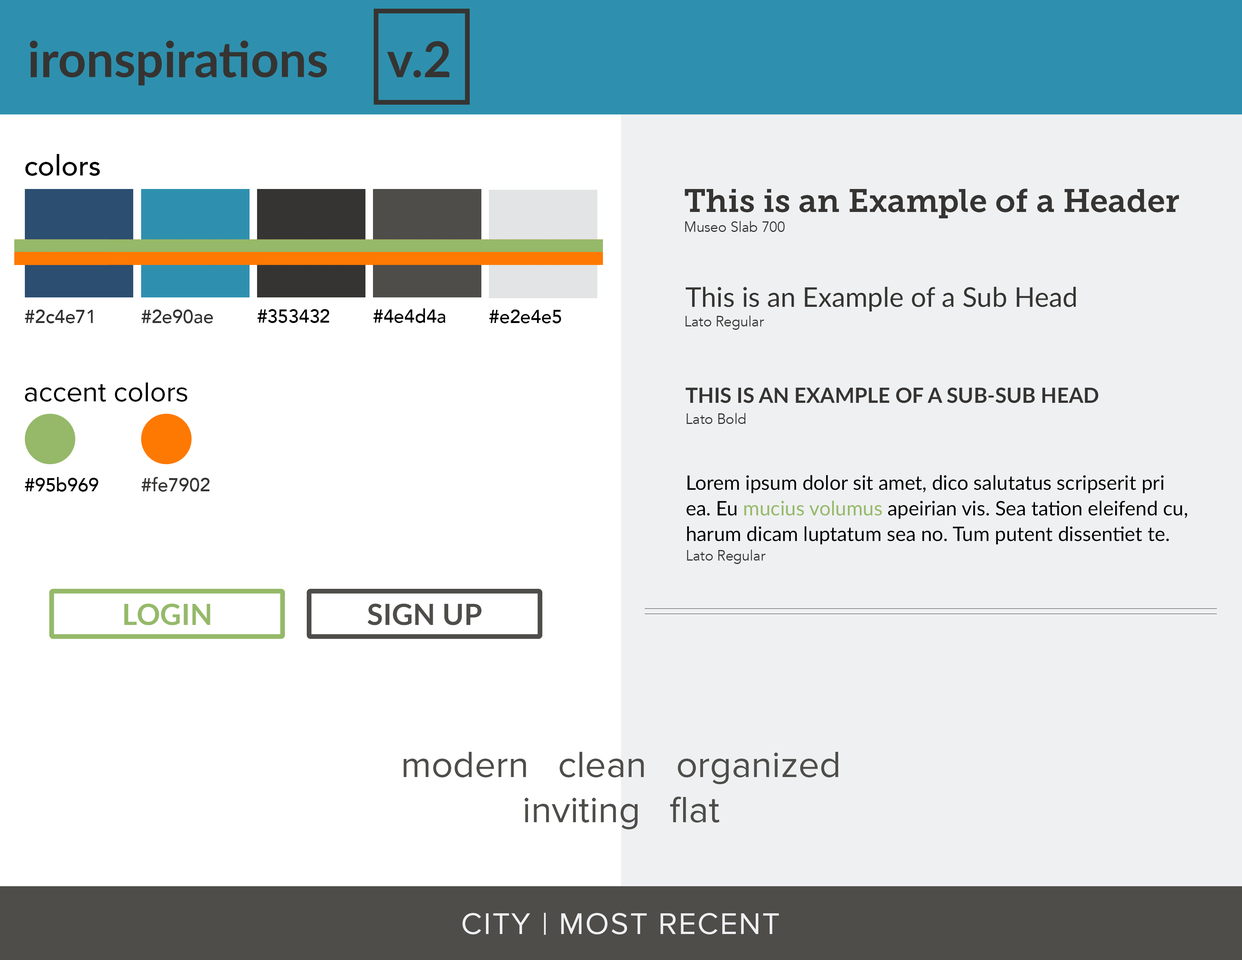
<style>
.page{position:relative;width:1242px;height:960px;background:#eff0f1}
.page>*{position:absolute;margin:0}
.t1{font:49.3px "Lato-Bold";color:#353432}
.t2{font:28.2px "Avenir-Medium";color:#030000}
.t3{font:32.4px "MuseoSlab-700";color:#353432}
.t4{font:14.1px "Avenir-Book";color:#333333}
.t5{font:27.2px "Lato-Regular";color:#353432}
.t6{font:18.8px "Avenir-Medium";color:#313131}
.t7{font:18.8px "Avenir-Medium";color:#333333}
.t8{font:18.8px "Avenir-Medium";color:#030000}
.t9{font:18.8px "Avenir-Medium";color:#000102}
.t10{font:28.2px "ProximaNova-Regular";color:#030000}
.t11{font:20.9px "Lato-Bold";color:#353432}
.t12{font:18.8px "Avenir-Medium";color:#353432}
.t13{font:19.9px/25.6px "Lato-Regular";color:#000000}
.t14{font:19.9px/25.6px "Lato-Regular";color:#95b969}
.t15{font:29.2px "Lato-Bold";color:#95b969}
.t16{font:29.2px "Lato-Bold";color:#4e4d4a}
.t17{font:37.6px "ProximaNova-Regular";color:#4e4d4a}
.t18{font:37.6px/6.8px "ProximaNova-Regular";color:#4e4d4a}
.t19{font:31px "ProximaNova-Regular";letter-spacing:0.045em;color:#eff0f1}
</style>
<div class="page">
<p class="t1" style="left:30px;top:40px;width:419px;height:45px">ironspirations     v.2</p>
<p class="t2" style="left:25px;top:154px;width:75px;height:22px">colors</p>
<p class="t3" style="left:685px;top:189px;width:494px;height:29px">This is an Example of a Header</p>
<p class="t4" style="left:685px;top:221px;width:100px;height:11px">Museo Slab 700</p>
<p class="t5" style="left:686px;top:286px;width:390px;height:26px">This is an Example of a Sub Head</p>
<p class="t6" style="left:25px;top:309px;width:68px;height:14px">#2c4e71</p>
<p class="t7" style="left:142px;top:309px;width:71px;height:14px">#2e90ae</p>
<p class="t8" style="left:257px;top:309px;width:72px;height:14px">#353432</p>
<p class="t9" style="left:373px;top:308px;width:72px;height:15px">#4e4d4a</p>
<p class="t9" style="left:489px;top:309px;width:72px;height:14px">#e2e4e5</p>
<p class="t4" style="left:685px;top:315px;width:79px;height:15px">Lato Regular</p>
<p class="t10" style="left:25px;top:382px;width:162px;height:20px">accent colors</p>
<p class="t11" style="left:685px;top:387px;width:413px;height:16px">THIS IS AN EXAMPLE OF A SUB-SUB HEAD</p>
<p class="t4" style="left:687px;top:413px;width:59px;height:11px">Lato Bold</p>
<p class="t9" style="left:25px;top:477px;width:73px;height:15px">#95b969</p>
<p class="t12" style="left:142px;top:477px;width:68px;height:15px">#fe7902</p>
<p class="t13" style="left:687px;top:475px;width:501px;height:69px">Lorem ipsum dolor sit amet, dico salutatus scripserit pri ea. Eu <span class="t14">mucius volumus </span>apeirian vis. Sea tation eleifend cu, harum dicam luptatum sea no. Tum putent dissentiet te.</p>
<p class="t4" style="left:687px;top:550px;width:79px;height:14px">Lato Regular</p>
<p class="t15" style="left:124px;top:603px;width:86px;height:22px">LOGIN</p>
<p class="t16" style="left:367px;top:603px;width:115px;height:22px">SIGN UP</p>
<p class="t17" style="left:404px;top:752px;width:434px;height:77px;text-align:center"><span class="t18">modern</span>   clean   organized<br>inviting   flat</p>
<p class="t19" style="left:463px;top:912px;width:316px;height:23px">CITY | MOST RECENT</p>
</div>
